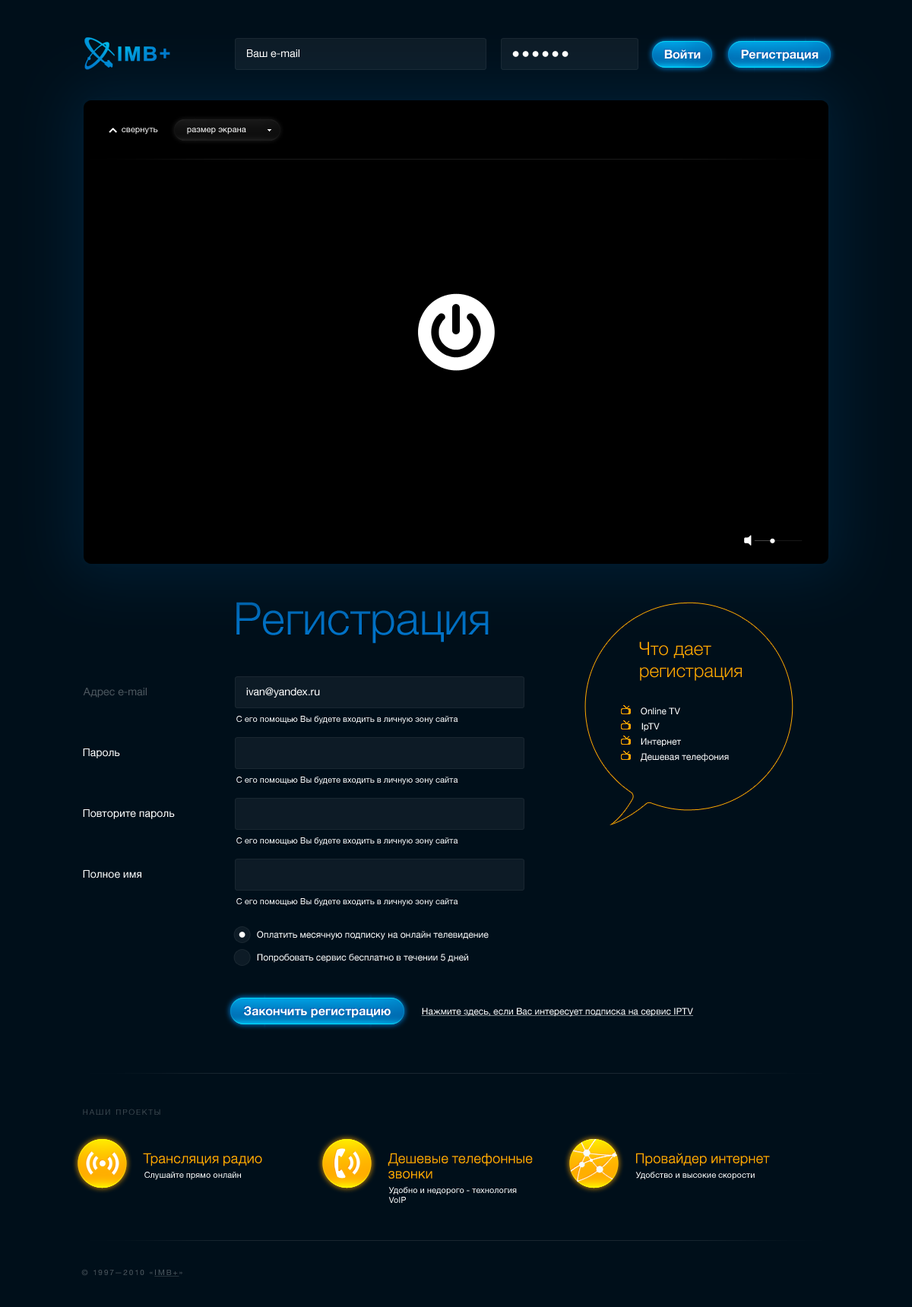
<style>
.page{position:relative;width:912px;height:1307px;background:#000f1a}
.page>*{position:absolute;margin:0}
.t1{font:10.6px "HelveticaNeue";color:#ffffff}
.t2{font:12.2px "HelveticaNeue-Bold";color:#ffffff}
.t3{font:8.4px "HelveticaNeue";color:#ffffff}
.t4{font:44.8px "HelveticaNeue-Light";color:#0073c9}
.t5{font:18.2px "HelveticaNeue-Light";color:#ffa800}
.t6{font:10.6px "HelveticaNeue";color:#4d575f}
.t7{font:9.1px "HelveticaNeue";color:#ffffff}
.t8{font:9.1px "HelveticaNeue";color:#ffffff;text-decoration:underline}
.t9{font:7.6px "HelveticaNeue-Light";letter-spacing:0.2em;color:#4d575f;text-transform:uppercase}
.t10{font:13.7px "HelveticaNeue-Light";color:#ffa800}
.t11{font:13.7px/15.2px "HelveticaNeue-Light";color:#ffa800}
.t12{font:7.6px "HelveticaNeue";letter-spacing:0.2em;color:#4d575f;text-transform:uppercase}
.t13{font:7.6px "HelveticaNeue";letter-spacing:0.2em;color:#4d575f;text-transform:uppercase;text-decoration:underline}
</style>
<div class="page">
<p class="t1" style="left:247px;top:49px;width:52px;height:9px">Ваш e-mail</p>
<p class="t2" style="left:664px;top:49px;width:37px;height:10px">Войти</p>
<p class="t2" style="left:741px;top:49px;width:78px;height:12px">Регистрация</p>
<p class="t3" style="left:122px;top:128px;width:36px;height:7px">свернуть</p>
<p class="t3" style="left:187px;top:128px;width:59px;height:7px">размер экрана</p>
<p class="t4" style="left:236px;top:602px;width:253px;height:42px">Регистрация</p>
<p class="t5" style="left:639px;top:642px;width:103px;height:39px">Что дает<br>регистрация</p>
<p class="t6" style="left:83px;top:688px;width:64px;height:10px">Адрес e-mail</p>
<p class="t1" style="left:246px;top:687px;width:74px;height:11px">ivan@yandex.ru</p>
<p class="t7" style="left:641px;top:708px;width:39px;height:7px">Online TV</p>
<p class="t3" style="left:236px;top:716px;width:222px;height:8px">С его помощью Вы будете входить в личную зону сайта</p>
<p class="t7" style="left:642px;top:723px;width:18px;height:9px">IpTV</p>
<p class="t1" style="left:83px;top:749px;width:37px;height:10px">Пароль</p>
<p class="t7" style="left:641px;top:738px;width:40px;height:9px">Интернет</p>
<p class="t7" style="left:641px;top:753px;width:88px;height:9px">Дешевая телефония</p>
<p class="t3" style="left:236px;top:777px;width:222px;height:8px">С его помощью Вы будете входить в личную зону сайта</p>
<p class="t1" style="left:83px;top:809px;width:92px;height:10px">Повторите пароль</p>
<p class="t3" style="left:236px;top:838px;width:222px;height:8px">С его помощью Вы будете входить в личную зону сайта</p>
<p class="t1" style="left:83px;top:870px;width:58px;height:9px">Полное имя</p>
<p class="t3" style="left:236px;top:898px;width:222px;height:9px">С его помощью Вы будете входить в личную зону сайта</p>
<p class="t7" style="left:257px;top:931px;width:232px;height:9px">Оплатить месячную подписку на онлайн телевидение</p>
<p class="t7" style="left:257px;top:954px;width:211px;height:9px">Попробовать сервис бесплатно в течении 5 дней</p>
<p class="t2" style="left:244px;top:1006px;width:147px;height:12px">Закончить регистрацию</p>
<p class="t8" style="left:421px;top:1008px;width:272px;height:9px">Нажмите здесь, если Вас интересует подписка на сервис IPTV</p>
<p class="t9" style="left:83px;top:1109px;width:77px;height:6px">Наши проекты</p>
<p class="t10" style="left:143px;top:1153px;width:119px;height:14px">Трансляция радио</p>
<p class="t11" style="left:388px;top:1153px;width:145px;height:26px">Дешевые телефонные<br>звонки</p>
<p class="t10" style="left:636px;top:1153px;width:134px;height:14px">Провайдер интернет</p>
<p class="t3" style="left:144px;top:1172px;width:97px;height:8px">Слушайте прямо онлайн</p>
<p class="t3" style="left:635px;top:1172px;width:120px;height:8px">Удобство и высокие скорости</p>
<p class="t3" style="left:388px;top:1187px;width:129px;height:16px">Удобно и недорого - технология<br>VoIP</p>
<p class="t12" style="left:81px;top:1269px;width:101px;height:8px">© 1997—2010 «<span class="t13">IMB+</span>»</p>
</div>
